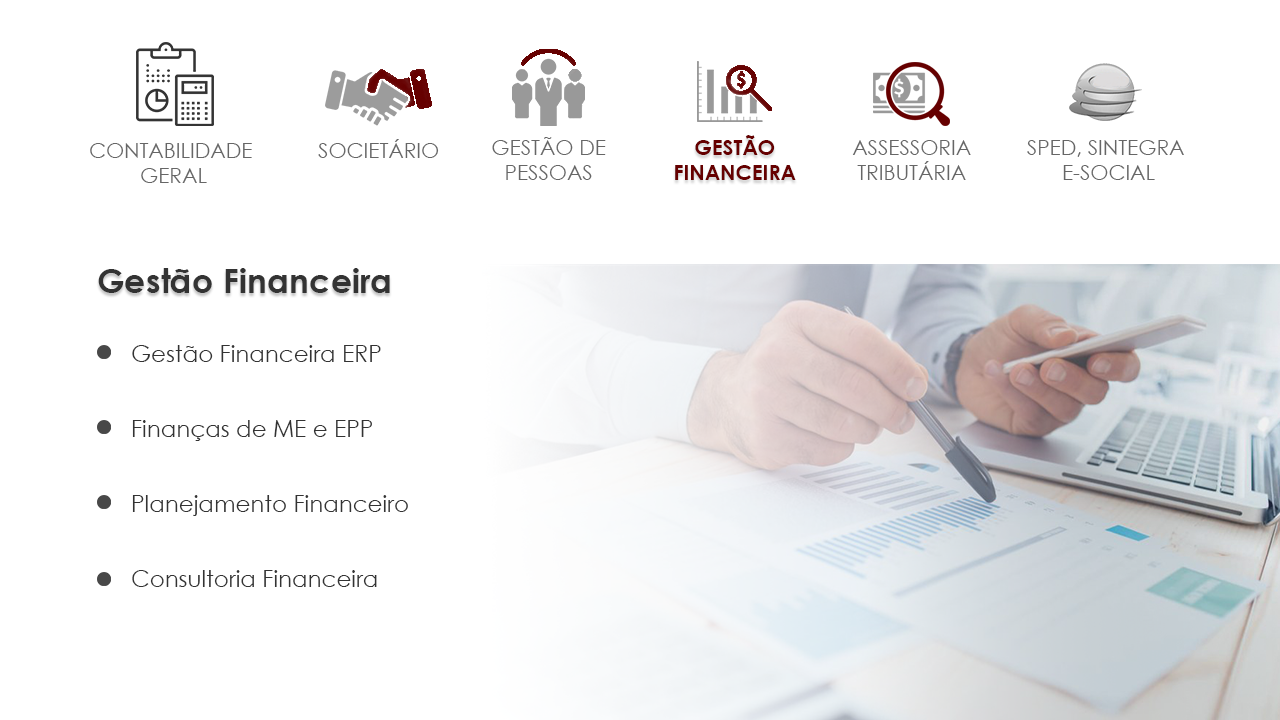
<style>
.page{position:relative;width:1280px;height:720px;background:#ffffff}
.page>*{position:absolute;margin:0}
.t1{font:20.8px/25px "CenturyGothic";color:#666666}
.t2{font:20.8px/25px "CenturyGothic-Bold";color:#660000}
.t3{font:20.8px "CenturyGothic";color:#666666}
.t4{font:33.3px "CenturyGothic-Bold";color:#333333}
.t5{font:22.9px/25px "CenturyGothic";color:#333333}
</style>
<div class="page">
<p class="t1" style="left:492px;top:137px;width:114px;height:43px;text-align:center">GESTÃO DE <br>PESSOAS</p>
<p class="t2" style="left:675px;top:135px;width:121px;height:45px;text-align:center">GESTÃO<br>FINANCEIRA</p>
<p class="t1" style="left:90px;top:143px;width:162px;height:40px;text-align:center">CONTABILIDADE<br> GERAL</p>
<p class="t3" style="left:318px;top:139px;width:121px;height:19px">SOCIETÁRIO</p>
<p class="t1" style="left:852px;top:140px;width:119px;height:40px;text-align:center">ASSESSORIA<br>TRIBUTÁRIA</p>
<p class="t1" style="left:1027px;top:140px;width:157px;height:40px;text-align:center">SPED, SINTEGRA<br> E-SOCIAL</p>
<p class="t4" style="left:98px;top:268px;width:292px;height:25px">Gestão Financeira</p>
<p class="t5" style="left:132px;top:345px;width:276px;height:242px">Gestão Financeira ERP<br><br><br>Finanças de ME e EPP<br><br><br>Planejamento Financeiro<br><br><br>Consultoria Financeira</p>
</div>
